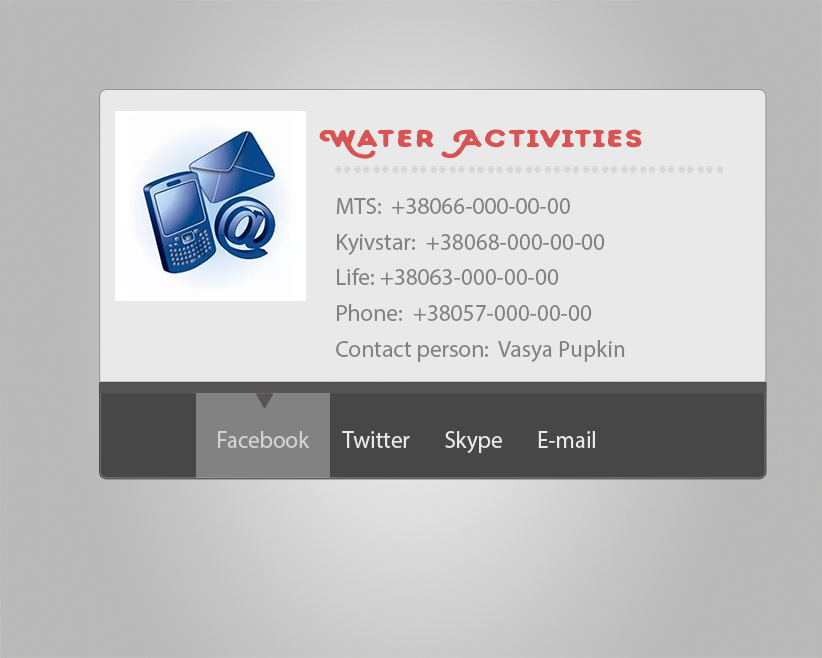
<style>
.page{position:relative;width:822px;height:658px;background:#e9e9e9}
.page>*{position:absolute;margin:0}
.t1{font:24.7px "Bough-Regular";letter-spacing:-0.005em;color:#d65454;scale:1.27 1}
.t2{font:41px "MyriadPro-Semibold";color:#d6d6d6}
.t3{font:23.8px/35.7px "MyriadPro-Regular";color:#6e6e6e}
.t4{font:24px "MyriadPro-Regular";color:#e9e9e9;scale:0.96 1}
</style>
<div class="page">
<p class="t1" style="left:319px;top:129px;width:323px;height:30px">Water  Activities</p>
<p class="t2" style="left:335px;top:166px;width:388px;height:7px">.........................................</p>
<p class="t3" style="left:336px;top:198px;width:289px;height:164px;opacity:0.87">MTS:  +38066-000-00-00<br>Kyivstar:  +38068-000-00-00<br>Life: +38063-000-00-00<br>Phone:  +38057-000-00-00<br>Contact person:  Vasya Pupkin</p>
<p class="t4" style="left:218px;top:431px;width:377px;height:22px">Facebook       Twitter       Skype       E-mail</p>
</div>
